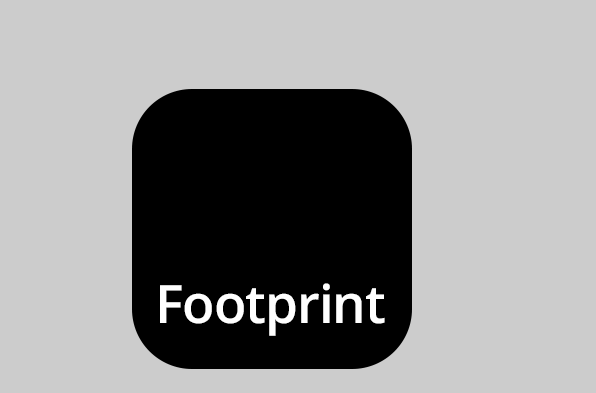
<style>
.page{position:relative;width:596px;height:393px;background:#cccccc}
.page>*{position:absolute;margin:0}
.t1{font:53px "OpenSans-Semibold";letter-spacing:-0.02em;color:#ffffff}
</style>
<div class="page">
<p class="t1" style="left:160px;top:283px;width:225px;height:53px">Footprint</p>
</div>
